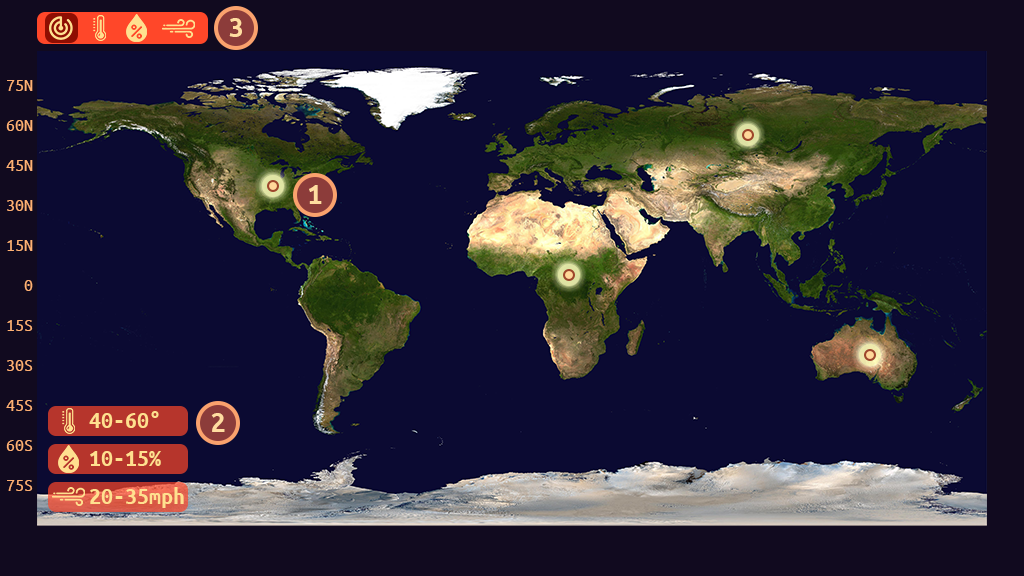
<style>
.page{position:relative;width:1024px;height:576px;background:#0b0a32}
.page>*{position:absolute;margin:0}
.t1{font:30px "UbuntuMono-Bold";color:#ffdda0}
.t2{font:18px/40px "UbuntuMono-Regular";color:#ffb174}
.t3{font:24px "UbuntuMono-Bold";color:#ffe08f}
</style>
<div class="page">
<p class="t1" style="left:229px;top:18px;width:13px;height:19px">3</p>
<p class="t2" style="left:6px;top:80px;width:27px;height:411px;text-align:right">75N<br>60N<br>45N<br>30N<br>15N<br>0<br>15S<br>30S<br>45S<br>60S<br>75S</p>
<p class="t1" style="left:309px;top:185px;width:13px;height:19px">1</p>
<p class="t3" style="left:89px;top:411px;width:70px;height:17px">40-60°</p>
<p class="t1" style="left:211px;top:413px;width:14px;height:19px">2</p>
<p class="t3" style="left:90px;top:451px;width:71px;height:15px">10-15%</p>
<p class="t3" style="left:90px;top:487px;width:94px;height:21px">20-35mph</p>
</div>
